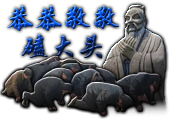
<style>
.page{position:relative;width:174px;height:140px;background:#ffffff}
.page>*{position:absolute;margin:0}
.t1{font:28.8px/27.9px "STXingkai"}
</style>
<div class="page">
<p class="t1" style="left:7px;top:6px;width:112px;height:53px;text-align:center">恭恭敬敬<br>磕大头</p>
</div>
